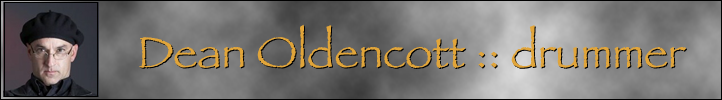
<style>
.page{position:relative;width:722px;height:100px}
.page>*{position:absolute;margin:0}
.t1{font:45px "Papyrus";color:#e1a53a}
.t2{font:45px "Papyrus"}
</style>
<div class="page">
<p class="t1" style="left:139px;top:24px;width:547px;height:44px">Dean Oldencott :: drummer</p>
<p class="t2" style="left:140px;top:25px;width:547px;height:44px">Dean Oldencott :: drummer</p>
</div>
